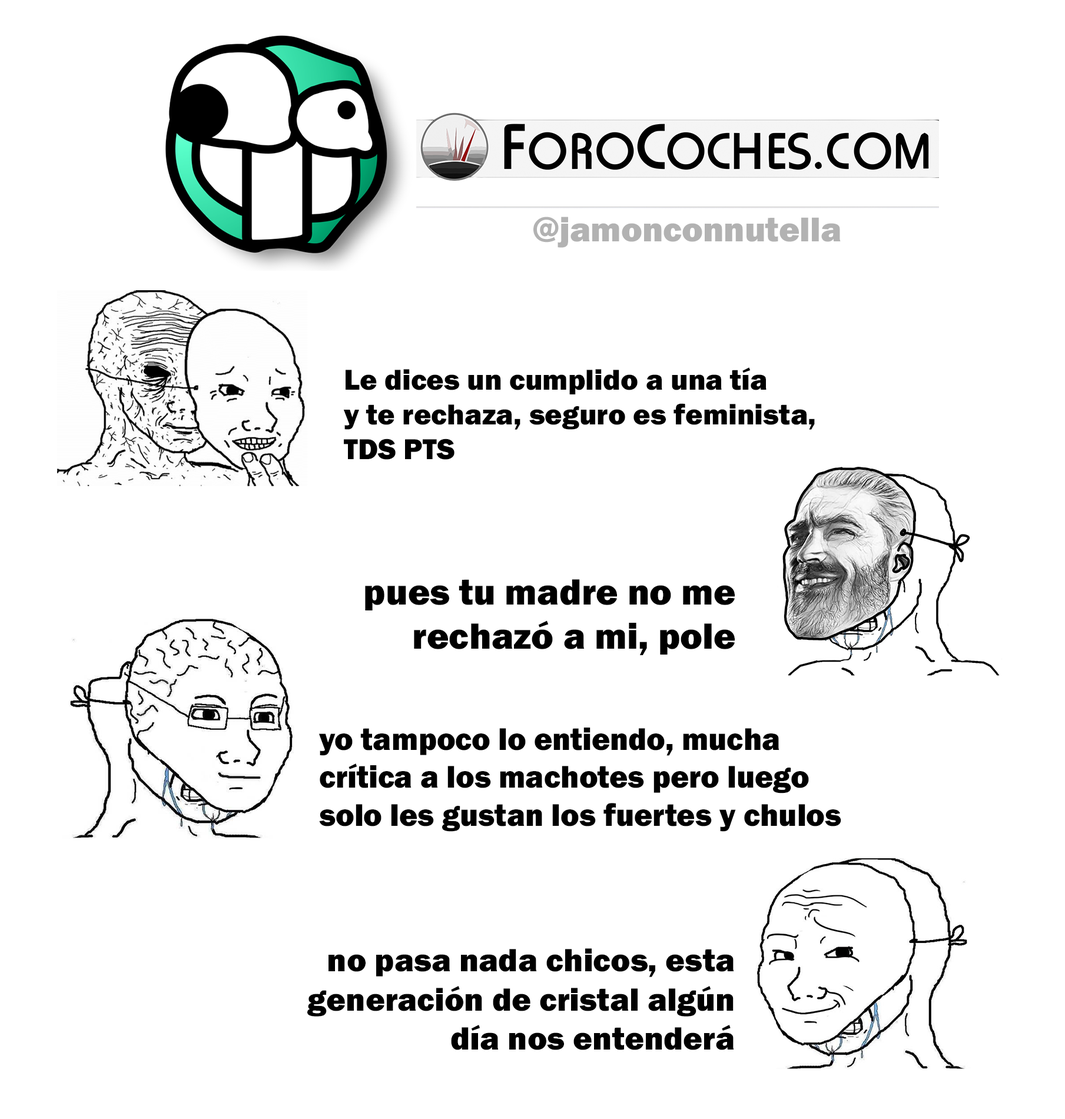
<style>
.page{position:relative;width:1065px;height:1119px;background:#ffffff}
.page>*{position:absolute;margin:0}
.t1{font:35.6px "FranklinGothic-Heavy";color:#b2b2b2}
.t2{font:29.7px "FranklinGothic-Heavy";color:#000000}
.t3{font:37.7px "FranklinGothic-Heavy";color:#000000}
.t4{font:32.5px "FranklinGothic-Heavy";color:#000000;scale:0.96 1}
.t5{font:33.3px "FranklinGothic-Heavy";color:#000000}
</style>
<div class="page">
<p class="t1" style="left:534px;top:217px;width:307px;height:31px">@jamonconnutella</p>
<p class="t2" style="left:343px;top:367px;width:472px;height:93px">Le dices un cumplido a una tía<br>y te rechaza, seguro es feminista,<br>TDS PTS</p>
<p class="t3" style="left:365px;top:579px;width:370px;height:76px;text-align:right">pues tu madre no me<br>rechazó a mi, pole</p>
<p class="t4" style="left:319px;top:728px;width:522px;height:104px">yo tampoco lo entiendo, mucha<br>crítica a los machotes pero luego<br>solo les gustan los fuertes y chulos</p>
<p class="t5" style="left:307px;top:949px;width:427px;height:102px;text-align:right">no pasa nada chicos, esta<br>generación de cristal algún<br>día nos entenderá</p>
</div>
